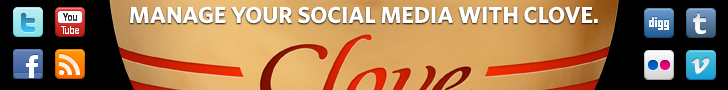
<style>
.page{position:relative;width:728px;height:90px;background:#000000}
.page>*{position:absolute;margin:0}
.t1{font:23.2px "WhitneyHTF-Bold";color:#ffffff}
</style>
<div class="page">
<p class="t1" style="left:130px;top:6px;width:468px;height:18px">MANAGE YOUR SOCIAL MEDIA WITH CLOVE.</p>
</div>
